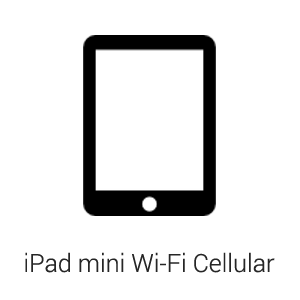
<style>
.page{position:relative;width:300px;height:300px;background:#ffffff}
.page>*{position:absolute;margin:0}
.t1{font:25px "Roboto-Light";color:#262626}
</style>
<div class="page">
<p class="t1" style="left:25px;top:252px;width:250px;height:21px">iPad mini Wi-Fi Cellular</p>
</div>
